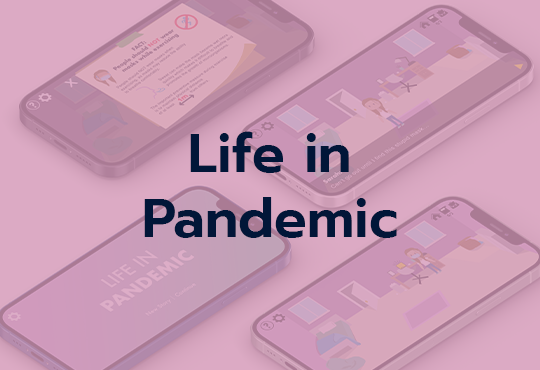
<style>
.page{position:relative;width:540px;height:370px}
.page>*{position:absolute;margin:0}
.t1{font:54.2px "Prompt-SemiBold";color:#011638}
</style>
<div class="page">
<p class="t1" style="left:144px;top:131px;width:253px;height:107px;text-align:center">Life in<br>Pandemic</p>
</div>
